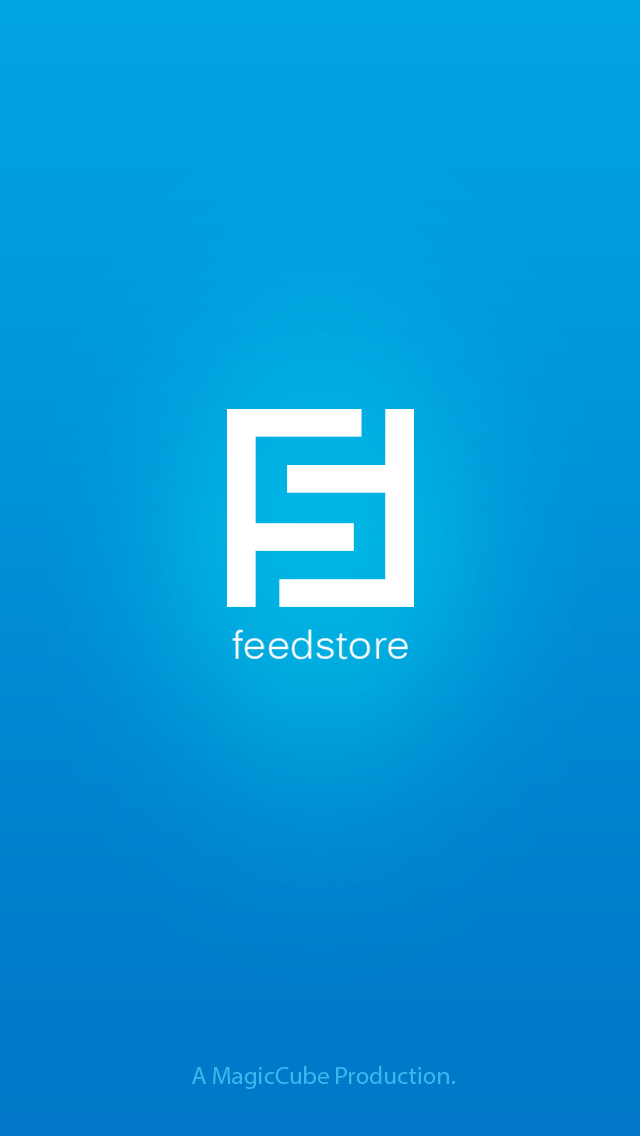
<style>
.page{position:relative;width:640px;height:1136px}
.page>*{position:absolute;margin:0}
.t1{font:40.2px "Kalinga";color:#ffffff}
.t2{font:25px "MyriadPro-Regular";color:#4aceff}
</style>
<div class="page">
<p class="t1" style="left:232px;top:629px;width:176px;height:31px">feedstore</p>
<p class="t2" style="left:192px;top:1066px;width:263px;height:23px;opacity:0.7">A MagicCube Production.</p>
</div>
